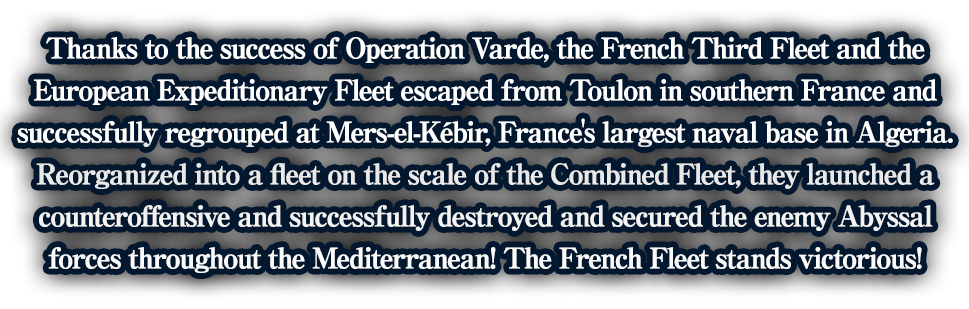
<style>
.page{position:relative;width:969px;height:309px;background:#03172f}
.page>*{position:absolute;margin:0}
.t1{font:28px/42px "RyuminPro-ExBold";letter-spacing:-0.08em;color:#ffffff;font-weight:bold}
</style>
<div class="page">
<p class="t1" style="left:17px;top:37px;width:936px;height:236px;text-align:center">Thanks to the success of Operation Varde, the French Third Fleet and the<br>European Expeditionary Fleet escaped from Toulon in southern France and<br>successfully regrouped at Mers-el-Kébir, France's largest naval base in Algeria.<br>Reorganized into a fleet on the scale of the Combined Fleet, they launched a<br>counteroffensive and successfully destroyed and secured the enemy Abyssal<br>forces throughout the Mediterranean! The French Fleet stands victorious!</p>
</div>
